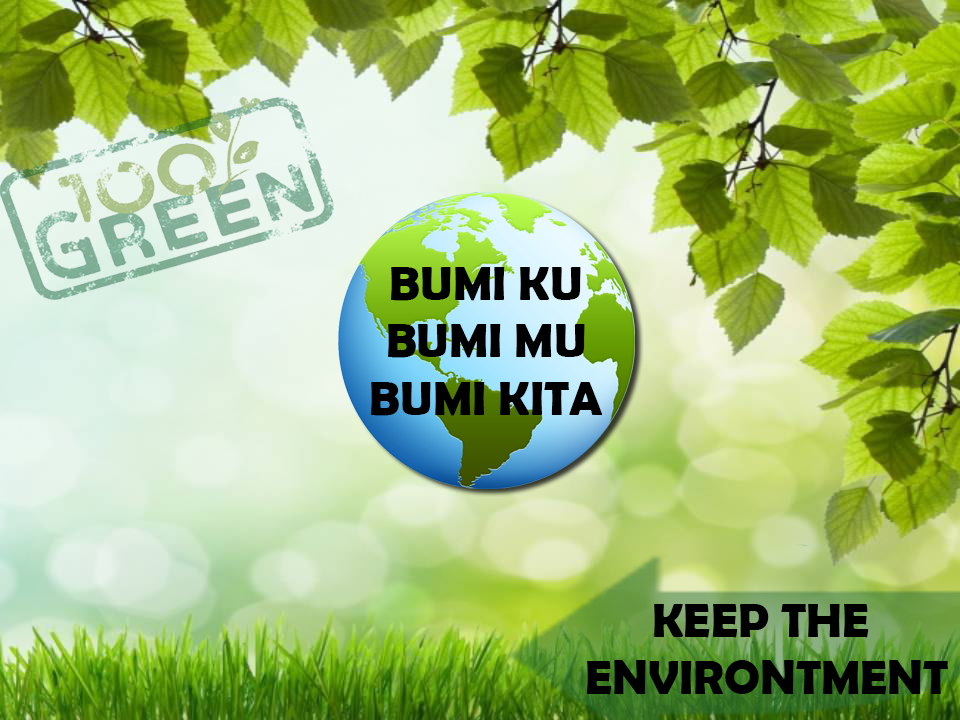
<style>
.page{position:relative;width:960px;height:720px}
.page>*{position:absolute;margin:0}
.t1{font:48px "BerlinSansFBDemi-Bold";color:#000000}
</style>
<div class="page">
<p class="t1" style="left:371px;top:267px;width:232px;height:149px;text-align:center">BUMI KU<br>BUMI MU<br>BUMI KITA</p>
<p class="t1" style="left:587px;top:604px;width:361px;height:91px;text-align:center">KEEP THE <br>ENVIRONTMENT</p>
</div>
